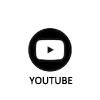
<style>
.page{position:relative;width:100px;height:100px;background:#ffffff}
.page>*{position:absolute;margin:0}
.t1{font:11px "Calibri";color:#000000}
</style>
<div class="page">
<p class="t1" style="left:29px;top:76px;width:44px;height:9px">YOUTUBE</p>
</div>
